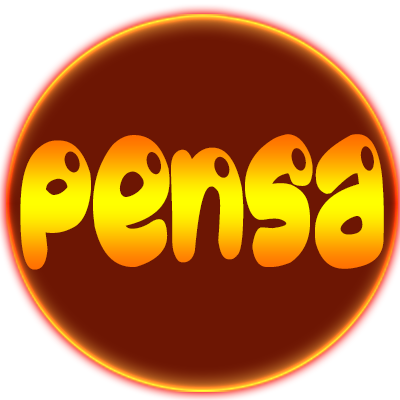
<style>
.page{position:relative;width:400px;height:400px;background:#6d1603}
.page>*{position:absolute;margin:0}
.t1{font:138.5px "JuicyFruity";scale:0.6 1}
</style>
<div class="page">
<p class="t1" style="left:20px;top:134px;width:364px;height:136px">pensa</p>
</div>
